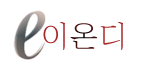
<style>
.page{position:relative;width:144px;height:72px;background:#ffffff}
.page>*{position:absolute;margin:0}
.t1{font:30px "Jabmlv50";letter-spacing:0.05em}
</style>
<div class="page">
<p class="t1" style="left:43px;top:22px;width:80px;height:28px">이온디</p>
</div>
